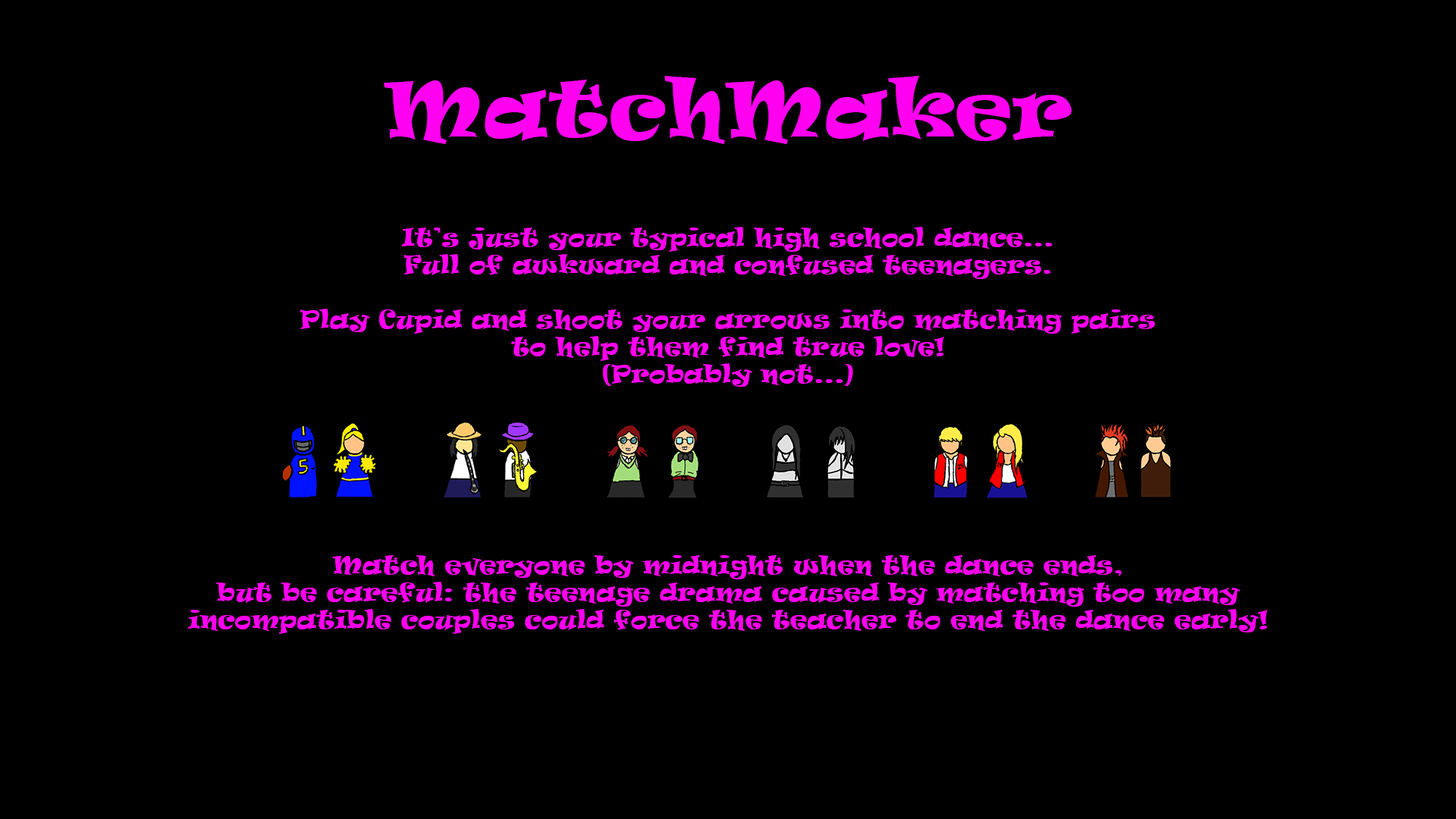
<style>
.page{position:relative;width:1456px;height:819px;background:#000000}
.page>*{position:absolute;margin:0}
.t1{font:22.7px "Ravie";letter-spacing:0.02em;color:#ff00f0}
.t2{font:75.8px "Ravie";letter-spacing:0.02em;color:#ff00f0}
</style>
<div class="page">
<p class="t1" style="left:187px;top:76px;width:1081px;height:558px;text-align:center"><span class="t2">MatchMaker<br><br></span><br>It’s just your typical high school dance...<br>Full of awkward and confused teenagers.<br><br>Play Cupid and shoot your arrows into matching pairs<br>to help them find true love!<br>(Probably not...)<br><br><br><br><br><br><br>Match everyone by midnight when the dance ends,<br>but be careful: the teenage drama caused by matching too many<br>incompatible couples could force the teacher to end the dance early!</p>
</div>
